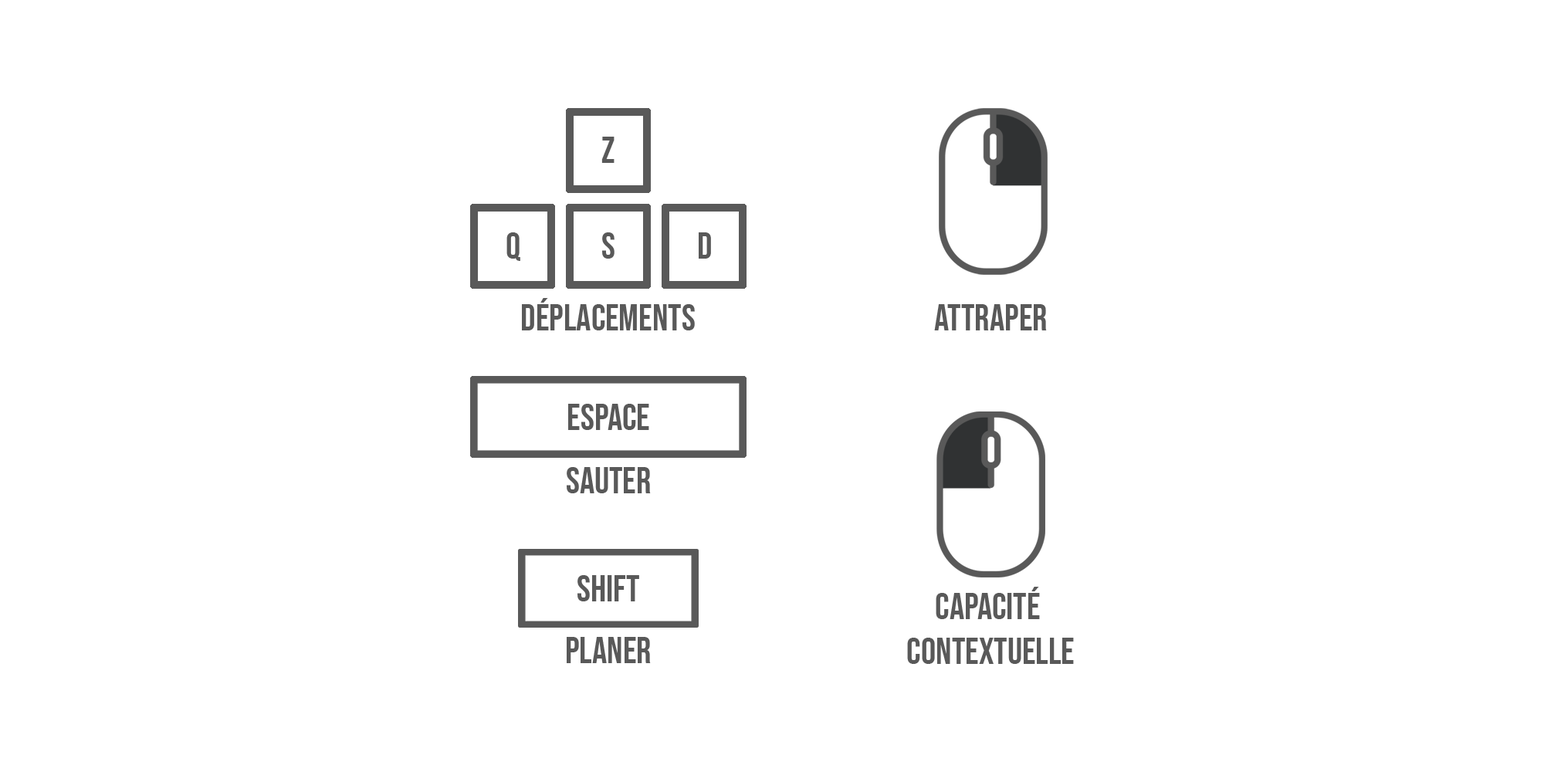
<style>
.page{position:relative;width:1544px;height:772px;background:#ffffff}
.page>*{position:absolute;margin:0}
.t1{font:37.1px "BebasNeue-Regular";color:#595959}
</style>
<div class="page">
<p class="t1" style="left:602px;top:137px;width:13px;height:26px">Z</p>
<p class="t1" style="left:507px;top:232px;width:13px;height:29px">Q</p>
<p class="t1" style="left:602px;top:232px;width:13px;height:27px">S</p>
<p class="t1" style="left:699px;top:232px;width:12px;height:27px">D</p>
<p class="t1" style="left:522px;top:298px;width:173px;height:32px">Déplacements</p>
<p class="t1" style="left:934px;top:304px;width:113px;height:26px">Attraper</p>
<p class="t1" style="left:568px;top:404px;width:81px;height:26px">Espace</p>
<p class="t1" style="left:567px;top:467px;width:84px;height:26px">Sauter</p>
<p class="t1" style="left:578px;top:575px;width:61px;height:27px">Shift</p>
<p class="t1" style="left:907px;top:587px;width:167px;height:77px;text-align:center">Capacité <br>contextuelle</p>
<p class="t1" style="left:567px;top:637px;width:84px;height:26px">Planer</p>
</div>
